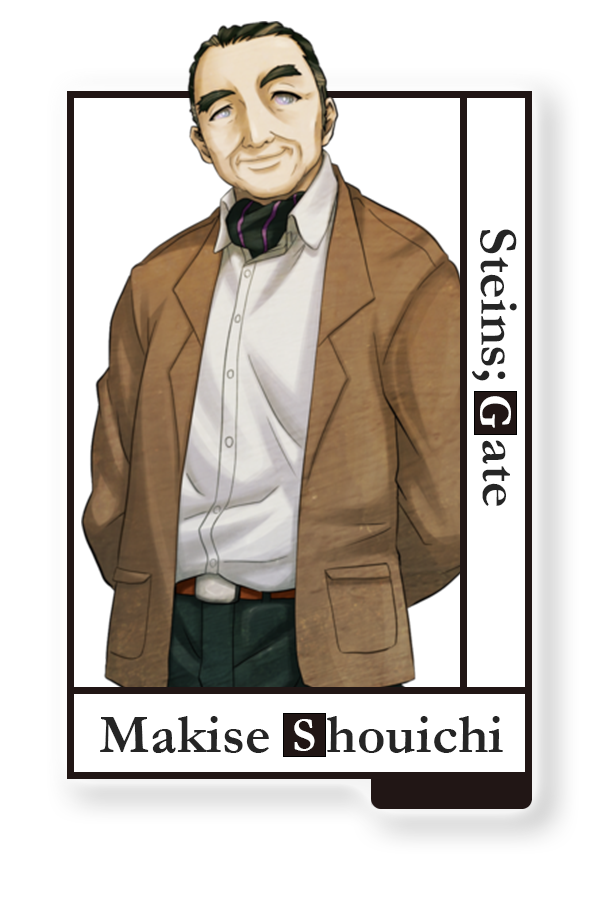
<style>
.page{position:relative;width:600px;height:900px;background:#ffffff}
.page>*{position:absolute;margin:0}
.t1{font:55.4px "Garamond-Bold";color:#252525}
.t2{font:47px "Garamond-Bold";color:#ffffff}
</style>
<div class="page">
<p class="t1" style="left:472px;top:229px;width:45px;height:277px;rotate:89deg">Steins;    ate</p>
<p class="t2" style="left:480px;top:396px;width:31px;height:32px;rotate:90deg">G</p>
<p class="t1" style="left:100px;top:716px;width:403px;height:37px">Makise    houichi</p>
<p class="t2" style="left:294px;top:719px;width:21px;height:32px">S</p>
</div>
